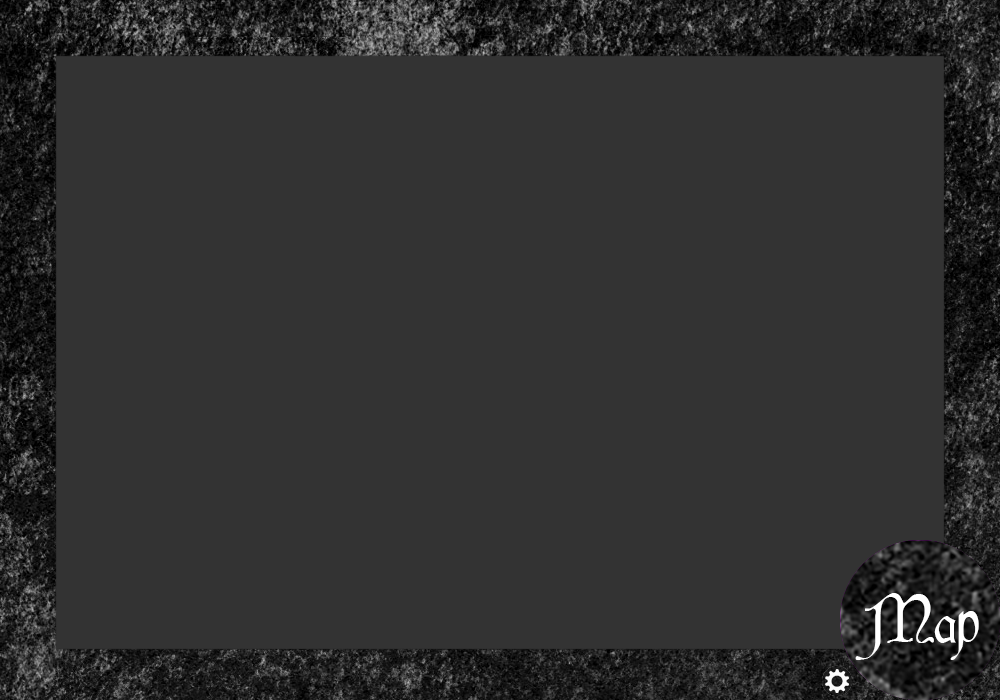
<style>
.page{position:relative;width:1000px;height:700px;background:#333333}
.page>*{position:absolute;margin:0}
.t1{font:62.5px "Cardinal-Alternate";color:#ffffff}
</style>
<div class="page">
<p class="t1" style="left:855px;top:593px;width:124px;height:67px">Map</p>
</div>
